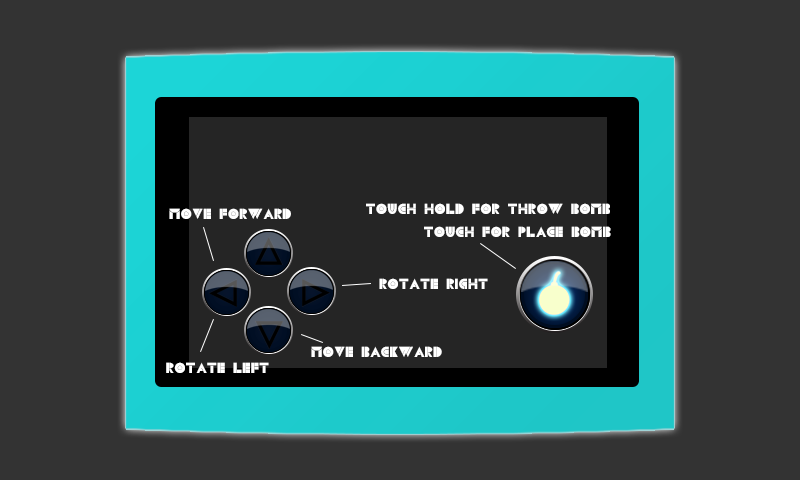
<style>
.page{position:relative;width:800px;height:480px;background:#333333}
.page>*{position:absolute;margin:0}
.t1{font:15px "CSBlocks";color:#ffffff}
</style>
<div class="page">
<p class="t1" style="left:169px;top:208px;width:122px;height:11px">Move Forward</p>
<p class="t1" style="left:366px;top:203px;width:244px;height:11px">touch hold for throw bomb</p>
<p class="t1" style="left:424px;top:226px;width:187px;height:11px">touch for place bomb</p>
<p class="t1" style="left:379px;top:278px;width:109px;height:11px">rotate right</p>
<p class="t1" style="left:311px;top:346px;width:131px;height:11px">Move Backward</p>
<p class="t1" style="left:166px;top:362px;width:103px;height:11px">rotate left</p>
</div>
